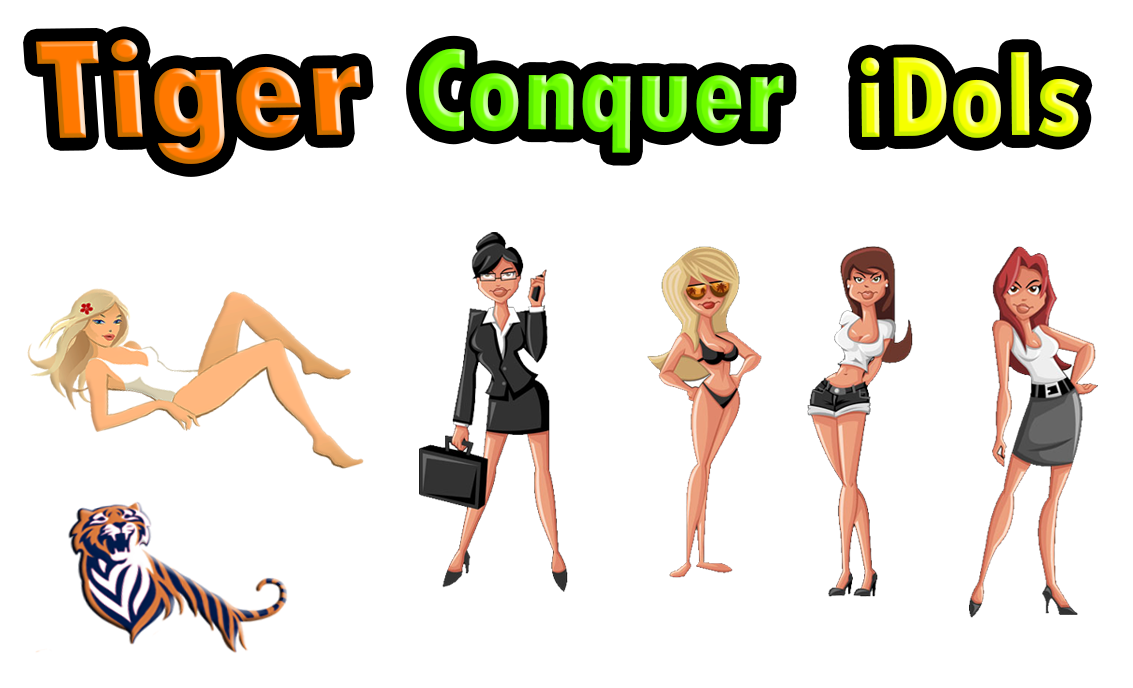
<style>
.page{position:relative;width:1133px;height:688px;background:#ffffff}
.page>*{position:absolute;margin:0}
.t1{font:147.7px "TwCenMT-CondensedExtraBold";scale:1.17 1}
.t2{font:120px "TwCenMT-CondensedExtraBold"}
</style>
<div class="page">
<p class="t1" style="left:36px;top:39px;width:325px;height:125px;rotate:-1deg">Tiger</p>
<p class="t2" style="left:419px;top:48px;width:365px;height:105px">Conquer</p>
<p class="t2" style="left:860px;top:52px;width:220px;height:86px">iDols</p>
</div>
